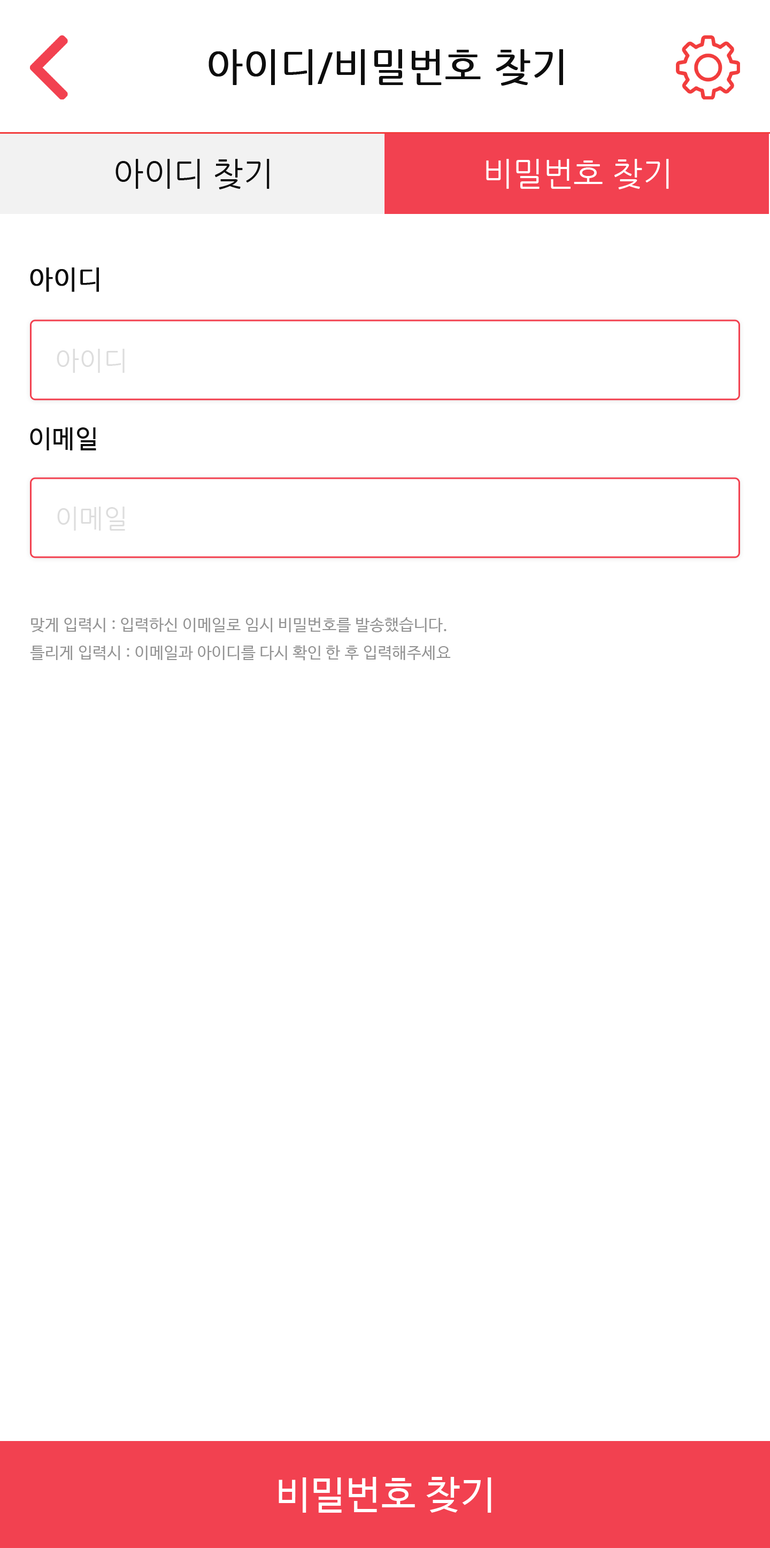
<style>
.page{position:relative;width:770px;height:1548px;background:#ffffff}
.page>*{position:absolute;margin:0}
.t1{font:38.5px "NanumGothic";color:#0d0d0d;font-weight:bold}
.t2{font:32.1px "NanumGothic";color:#0d0d0d}
.t3{font:32.1px "NanumGothic";color:#ffffff}
.t4{font:25.7px "NanumGothic";color:#0d0d0d;font-weight:bold}
.t5{font:25.7px "NanumGothic";color:#dddddd}
.t6{font:25.7px "NanumBarunGothic";letter-spacing:0.02em;color:#0d0d0d}
.t7{font:16px "NanumBarunGothic";letter-spacing:0.02em;color:#939393}
.t8{font:38.5px "NanumBarunGothic";letter-spacing:0.02em;color:#ffffff}
</style>
<div class="page">
<p class="t1" style="left:209px;top:49px;width:354px;height:37px">아이디/비밀번호 찾기</p>
<p class="t2" style="left:116px;top:159px;width:154px;height:30px">아이디 찾기</p>
<p class="t3" style="left:486px;top:159px;width:183px;height:30px">비밀번호 찾기</p>
<p class="t4" style="left:30px;top:267px;width:69px;height:25px">아이디</p>
<p class="t5" style="left:57px;top:349px;width:68px;height:24px">아이디</p>
<p class="t6" style="left:30px;top:427px;width:66px;height:23px">이메일</p>
<p class="t5" style="left:57px;top:507px;width:68px;height:24px">이메일</p>
<p class="t7" style="left:30px;top:617px;width:421px;height:44px">맞게 입력시 : 입력하신 이메일로 임시 비밀번호를 발송했습니다.<br>틀리게 입력시 : 이메일과 아이디를 다시 확인 한 후 입력해주세요</p>
<p class="t8" style="left:279px;top:1477px;width:213px;height:36px">비밀번호 찾기</p>
</div>
